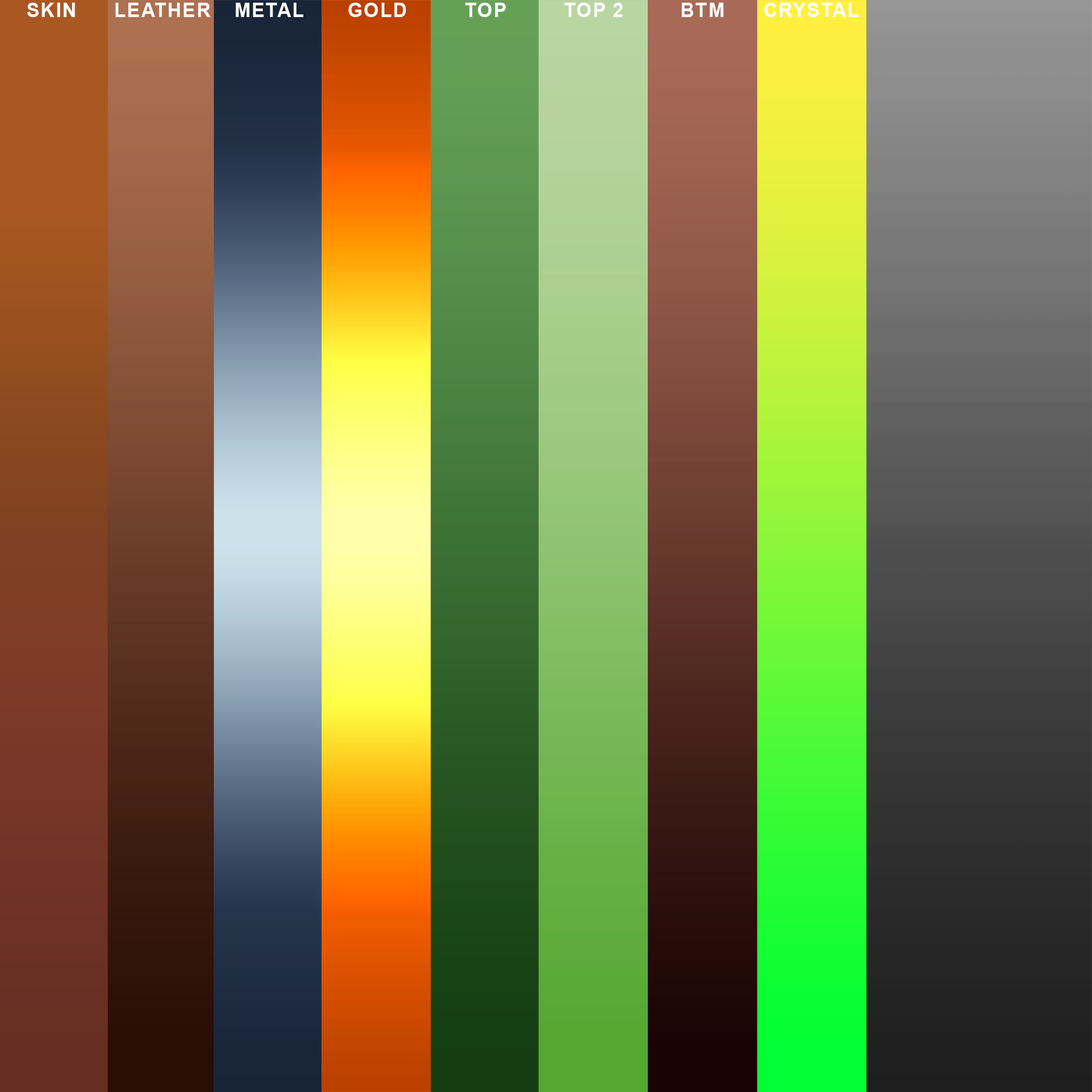
<style>
.page{position:relative;width:1092px;height:1092px}
.page>*{position:absolute;margin:0}
.t1{font:19.6px "Arial-BoldMT";letter-spacing:0.05em;color:#ffffff}
</style>
<div class="page">
<p class="t1" style="left:27px;top:3px;width:48px;height:14px">SKIN</p>
<p class="t1" style="left:115px;top:3px;width:96px;height:14px">LEATHER</p>
<p class="t1" style="left:236px;top:3px;width:67px;height:14px">METAL</p>
<p class="t1" style="left:348px;top:3px;width:58px;height:14px">GOLD</p>
<p class="t1" style="left:465px;top:3px;width:41px;height:14px">TOP</p>
<p class="t1" style="left:564px;top:3px;width:59px;height:14px">TOP 2</p>
<p class="t1" style="left:681px;top:3px;width:43px;height:14px">BTM</p>
<p class="t1" style="left:764px;top:3px;width:94px;height:14px">CRYSTAL</p>
</div>
